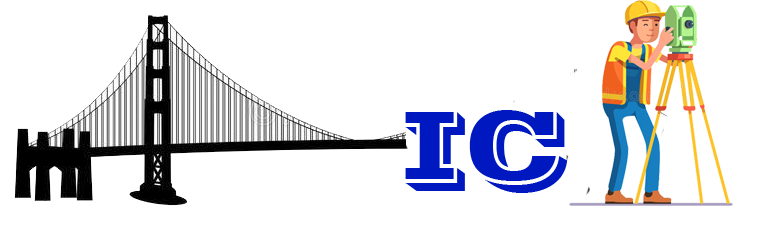
<style>
.page{position:relative;width:768px;height:236px;background:#ffffff}
.page>*{position:absolute;margin:0}
.t1{font:100px "VinetaBT-Regular";color:#0018bf}
</style>
<div class="page">
<p class="t1" style="left:405px;top:110px;width:163px;height:83px">IC</p>
</div>
